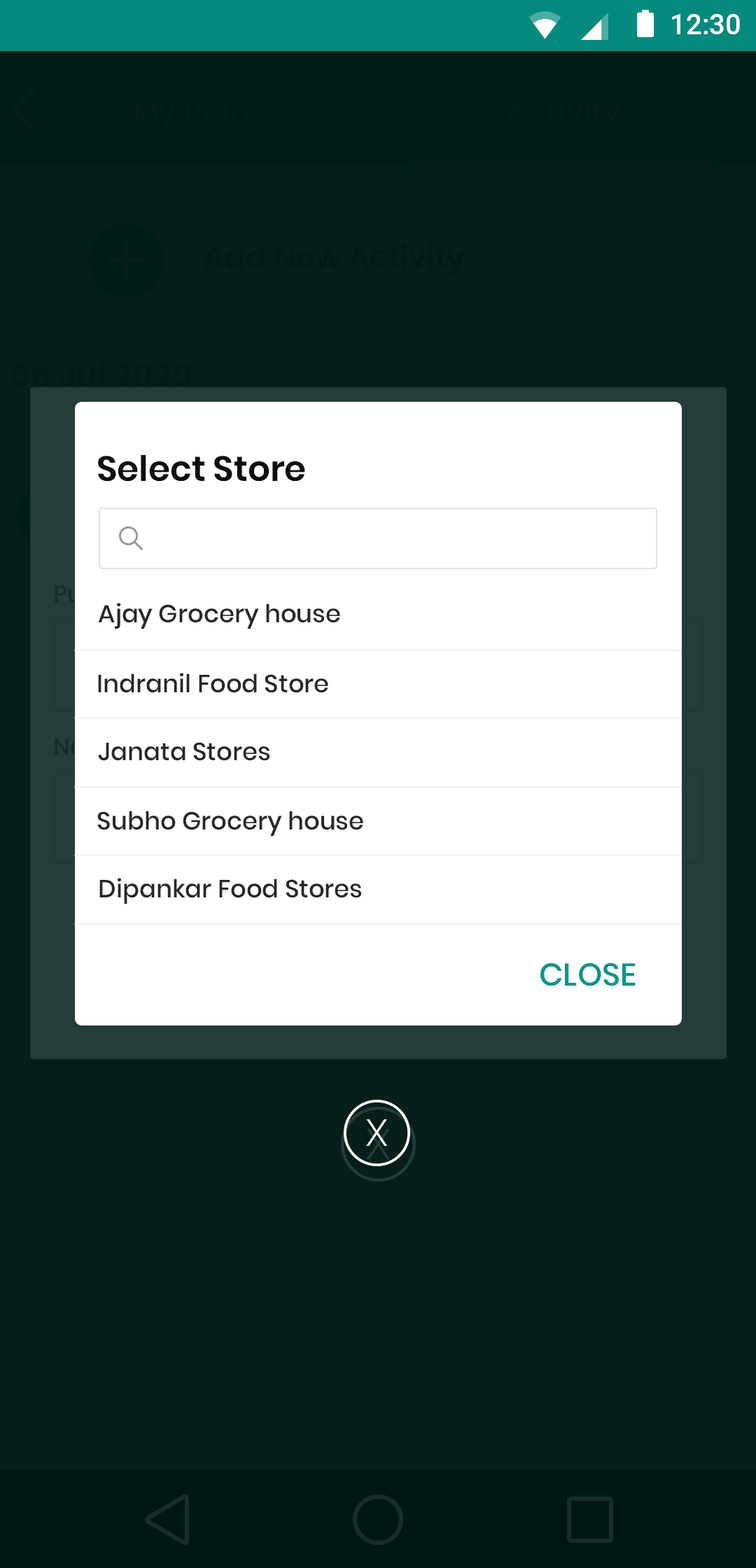
<style>
.page{position:relative;width:756px;height:1568px;background:#061f1a}
.page>*{position:absolute;margin:0}
.t1{font:35px "Poppins-SemiBold";color:#0f0f0f}
.t2{font:24.8px "Poppins-Medium";color:#282828}
.t3{font:31.5px "Poppins-Medium";color:#029688;text-transform:uppercase}
.t4{font:37.4px "Roboto-Light";color:#ffffff}
</style>
<div class="page">
<p class="t1" style="left:98px;top:455px;width:207px;height:27px">Select Store</p>
<p class="t2" style="left:98px;top:603px;width:242px;height:26px">Ajay Grocery house</p>
<p class="t2" style="left:98px;top:673px;width:230px;height:20px">Indranil Food Store</p>
<p class="t2" style="left:98px;top:742px;width:172px;height:19px">Janata Stores</p>
<p class="t2" style="left:97px;top:811px;width:266px;height:25px">Subho Grocery house</p>
<p class="t2" style="left:99px;top:878px;width:262px;height:26px">Dipankar Food Stores</p>
<p class="t3" style="left:540px;top:962px;width:96px;height:24px">Close</p>
<p class="t4" style="left:366px;top:1119px;width:21px;height:27px">X</p>
</div>
